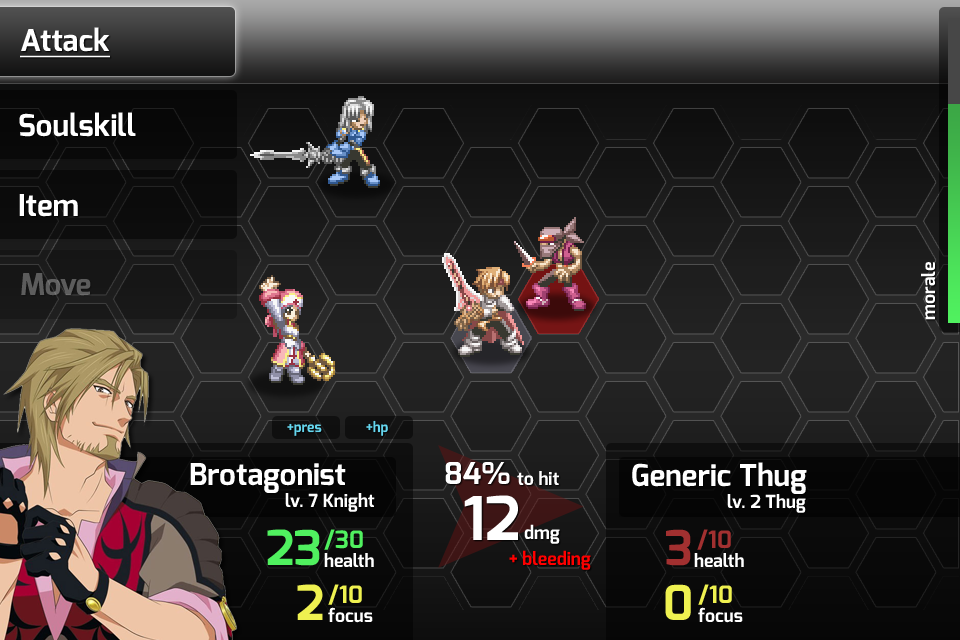
<style>
.page{position:relative;width:960px;height:640px}
.page>*{position:absolute;margin:0}
.t1{font:30px "Exo-Bold";color:#ffffff;text-decoration:underline}
.t2{font:30px "Exo-Bold";color:#ffffff}
.t3{font:18px "Exo-Bold";color:#ffffff}
.t4{font:30px "Exo-Bold";color:#5c5c5c}
.t5{font:14px "Exo-Bold";color:#65d6ee}
.t6{font:60px "Exo-Bold";color:#ffffff}
.t7{font:48px "Exo-Bold";color:#50f15f}
.t8{font:24px "Exo-Bold";color:#50f15f}
.t9{font:48px "Exo-Bold";color:#a23030}
.t10{font:24px "Exo-Bold";color:#a23030}
.t11{font:18px "Exo-Bold";color:#ff0000}
.t12{font:48px "Exo-Bold";color:#eff150}
.t13{font:24px "Exo-Bold";color:#eff150}
</style>
<div class="page">
<p class="t1" style="left:20px;top:27px;width:90px;height:31px">Attack</p>
<p class="t2" style="left:19px;top:112px;width:117px;height:25px">Soulskill</p>
<p class="t2" style="left:19px;top:194px;width:59px;height:23px">Item</p>
<p class="t3" style="left:921px;top:262px;width:14px;height:58px;rotate:-90deg">morale</p>
<p class="t4" style="left:21px;top:273px;width:70px;height:23px">Move</p>
<p class="t5" style="left:287px;top:423px;width:35px;height:13px">+pres</p>
<p class="t5" style="left:366px;top:420px;width:22px;height:16px">+hp</p>
<p class="t2" style="left:445px;top:462px;width:65px;height:22px">84%</p>
<p class="t2" style="left:632px;top:462px;width:175px;height:32px">Generic Thug</p>
<p class="t2" style="left:190px;top:463px;width:156px;height:30px">Brotagonist</p>
<p class="t3" style="left:517px;top:471px;width:42px;height:14px">to hit</p>
<p class="t3" style="left:285px;top:493px;width:90px;height:19px">lv. 7 Knight</p>
<p class="t6" style="left:464px;top:495px;width:54px;height:45px">12</p>
<p class="t3" style="left:727px;top:494px;width:79px;height:19px">lv. 2 Thug</p>
<p class="t7" style="left:267px;top:529px;width:53px;height:37px">23</p>
<p class="t8" style="left:324px;top:529px;width:39px;height:21px">/30</p>
<p class="t3" style="left:524px;top:524px;width:36px;height:20px">dmg</p>
<p class="t9" style="left:666px;top:529px;width:25px;height:37px">3</p>
<p class="t10" style="left:697px;top:529px;width:34px;height:21px">/10</p>
<p class="t3" style="left:324px;top:553px;width:50px;height:14px">health</p>
<p class="t11" style="left:509px;top:550px;width:82px;height:20px">+ bleeding</p>
<p class="t3" style="left:694px;top:553px;width:50px;height:14px">health</p>
<p class="t12" style="left:297px;top:584px;width:26px;height:36px">2</p>
<p class="t13" style="left:328px;top:584px;width:34px;height:21px">/10</p>
<p class="t12" style="left:665px;top:584px;width:26px;height:36px">0</p>
<p class="t13" style="left:698px;top:584px;width:34px;height:21px">/10</p>
<p class="t3" style="left:328px;top:607px;width:45px;height:16px">focus</p>
<p class="t3" style="left:698px;top:607px;width:45px;height:16px">focus</p>
</div>
